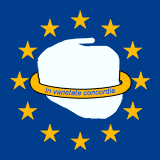
<style>
.page{position:relative;width:160px;height:160px;background:#003d8d}
.page>*{position:absolute;margin:0}
.t1{font:7.2px "Arial-ItalicMT";color:#005acd}
</style>
<div class="page">
<p class="t1" style="left:45px;top:87px;width:70px;height:9px">In varietate concordia</p>
</div>
